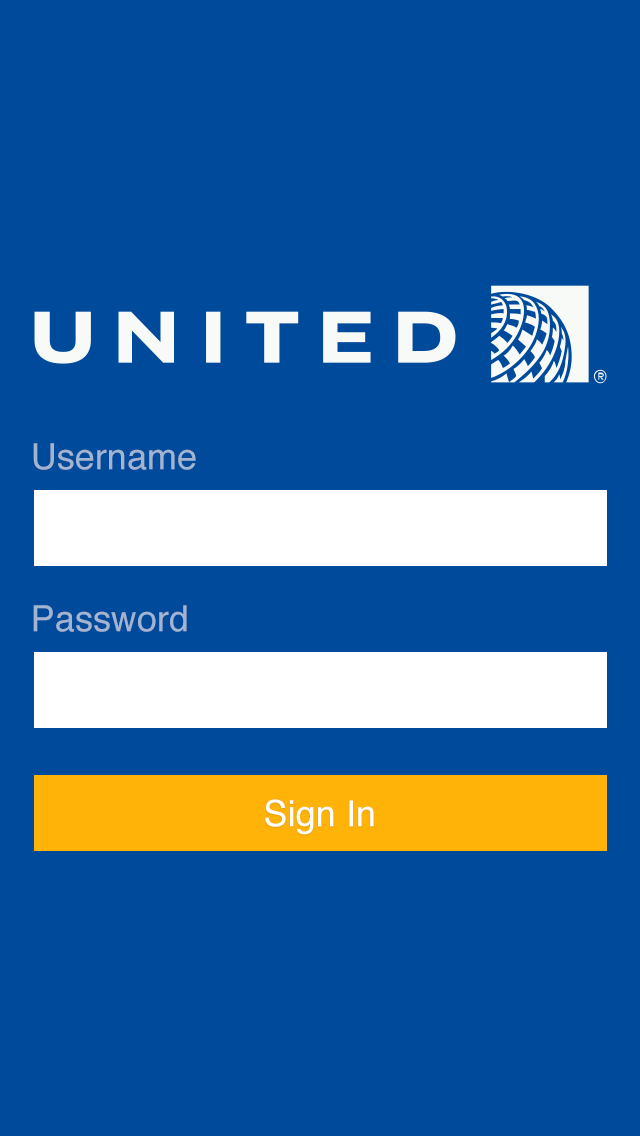
<style>
.page{position:relative;width:640px;height:1136px;background:#004a9b}
.page>*{position:absolute;margin:0}
.t1{font:36px "Helvetica";color:#a3b4d1}
.t2{font:36px "Helvetica";color:#ffffff}
</style>
<div class="page">
<p class="t1" style="left:33px;top:443px;width:163px;height:27px">Username</p>
<p class="t1" style="left:33px;top:605px;width:154px;height:27px">Password</p>
<p class="t2" style="left:265px;top:799px;width:109px;height:36px">Sign In</p>
</div>
